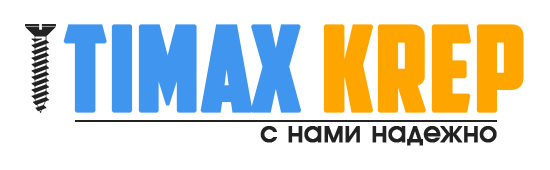
<style>
.page{position:relative;width:550px;height:170px;background:#ffffff}
.page>*{position:absolute;margin:0}
.t1{font:117px "AmericanCaptain";color:#4096ee;font-weight:bold}
.t2{font:117px "AmericanCaptain";color:#ffa500;font-weight:bold}
.t3{font:30px "AAvanteBs";color:#222222;font-weight:bold}
</style>
<div class="page">
<p class="t1" style="left:63px;top:24px;width:461px;height:89px">Timax <span class="t2">Krep</span></p>
<p class="t3" style="left:260px;top:126px;width:237px;height:20px">с нами надежно</p>
</div>
